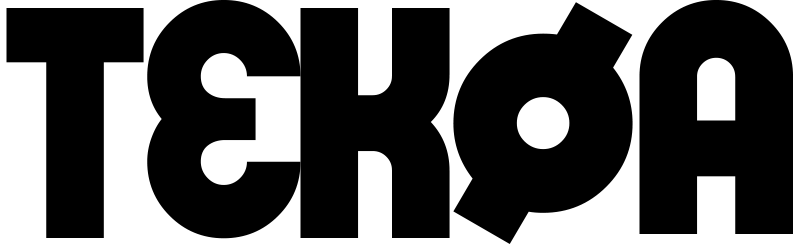
<style>
.page{position:relative;width:800px;height:250px;background:#000000}
.page>*{position:absolute;margin:0}
.t1{font:250px "VLNLDonuts-Regular";color:#000000}
.t2{font:283.4px "VLNLDonuts-Regular";color:#000000}
</style>
<div class="page">
<p class="t1" style="left:147px;top:0px;width:154px;height:239px">E</p>
<p class="t2" style="left:453px;top:2px;width:180px;height:242px">ø</p>
<p class="t1" style="left:639px;top:0px;width:154px;height:234px">A</p>
<p class="t1" style="left:6px;top:8px;width:138px;height:230px">T</p>
<p class="t1" style="left:300px;top:8px;width:150px;height:230px">K</p>
</div>
